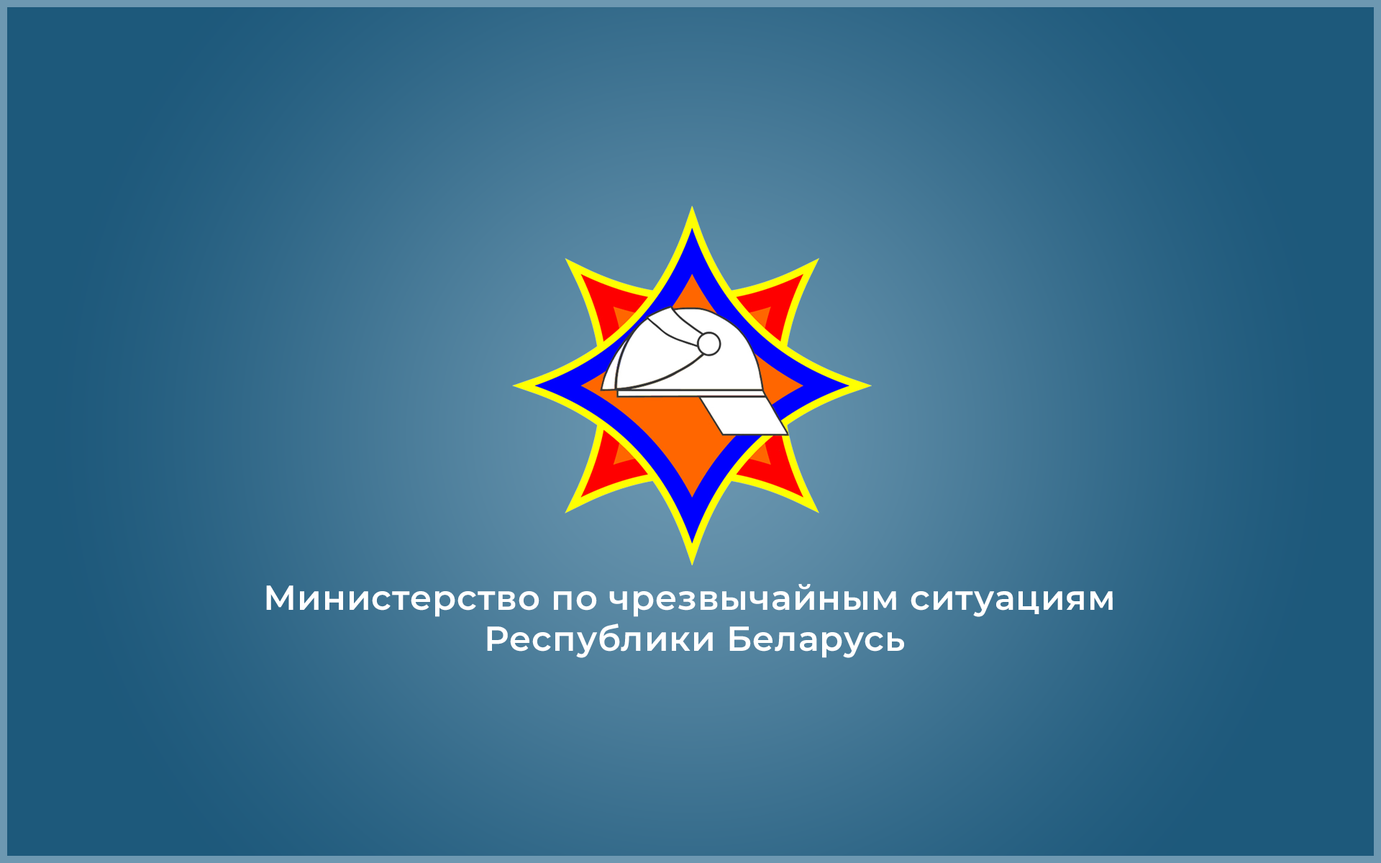
<style>
.page{position:relative;width:1381px;height:863px}
.page>*{position:absolute;margin:0}
.t1{font:34.5px "Montserrat-SemiBold";letter-spacing:0.02em;color:#ffffff}
</style>
<div class="page">
<p class="t1" style="left:266px;top:584px;width:847px;height:74px;text-align:center">Министерство по чрезвычайным ситуациям <br>Республики Беларусь</p>
</div>
